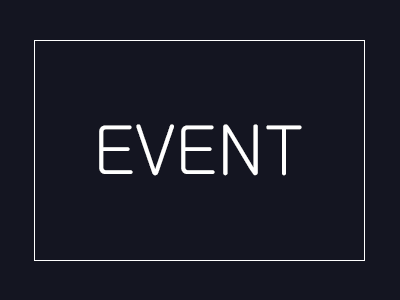
<style>
.page{position:relative;width:400px;height:300px;background:#141521}
.page>*{position:absolute;margin:0}
.t1{font:67.4px "Gulim";color:#ffffff}
</style>
<div class="page">
<p class="t1" style="left:99px;top:124px;width:203px;height:52px">EVENT</p>
</div>
